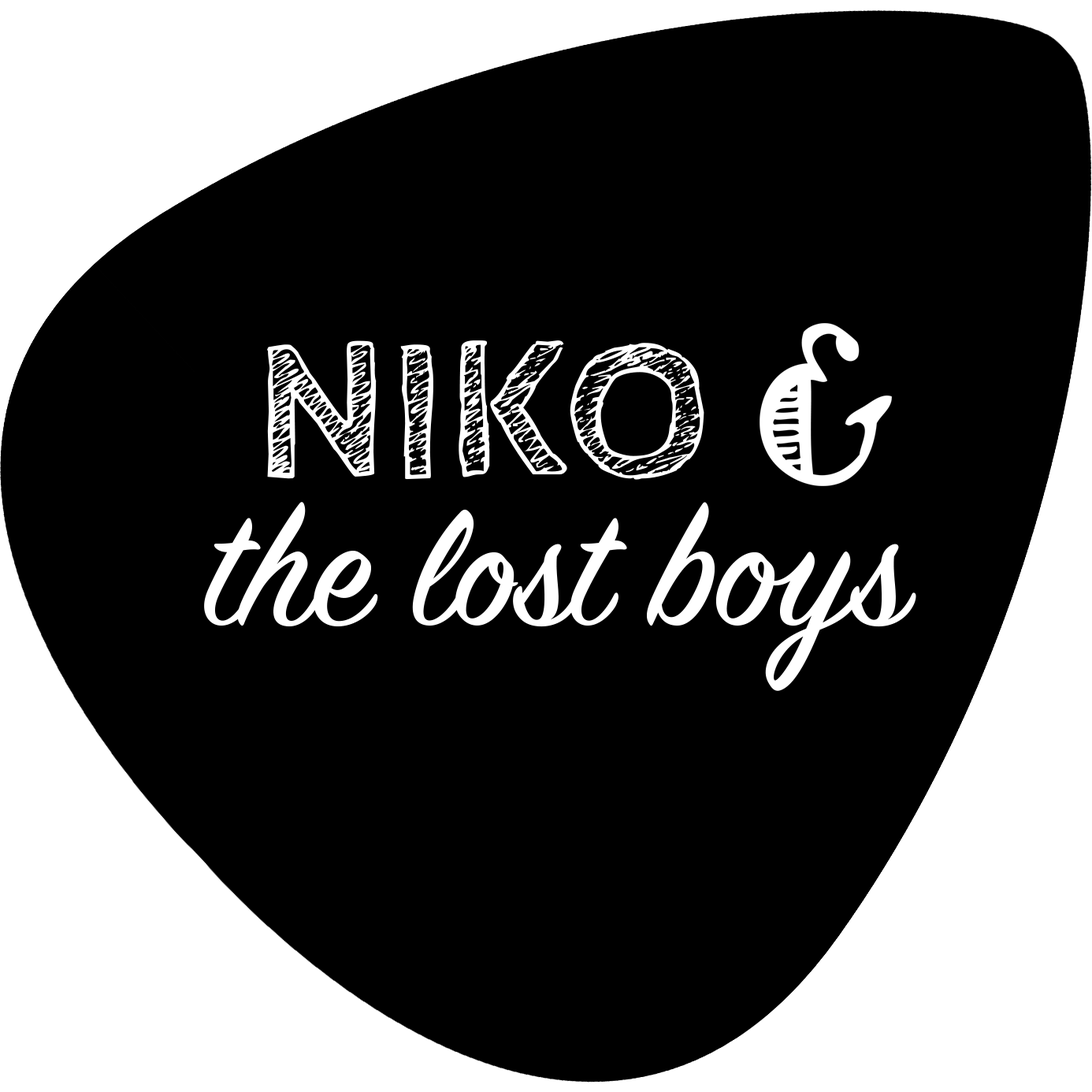
<style>
.page{position:relative;width:1092px;height:1092px;background:#000000}
.page>*{position:absolute;margin:0}
.t1{font:204px "CabinSketch-Bold";color:#ffffff}
.t2{font:183.6px "SignPainter-HouseScript";color:#ffffff}
</style>
<div class="page">
<p class="t1" style="left:267px;top:340px;width:437px;height:140px">NIKO</p>
<p class="t2" style="left:204px;top:502px;width:712px;height:189px">the lost boys</p>
</div>
